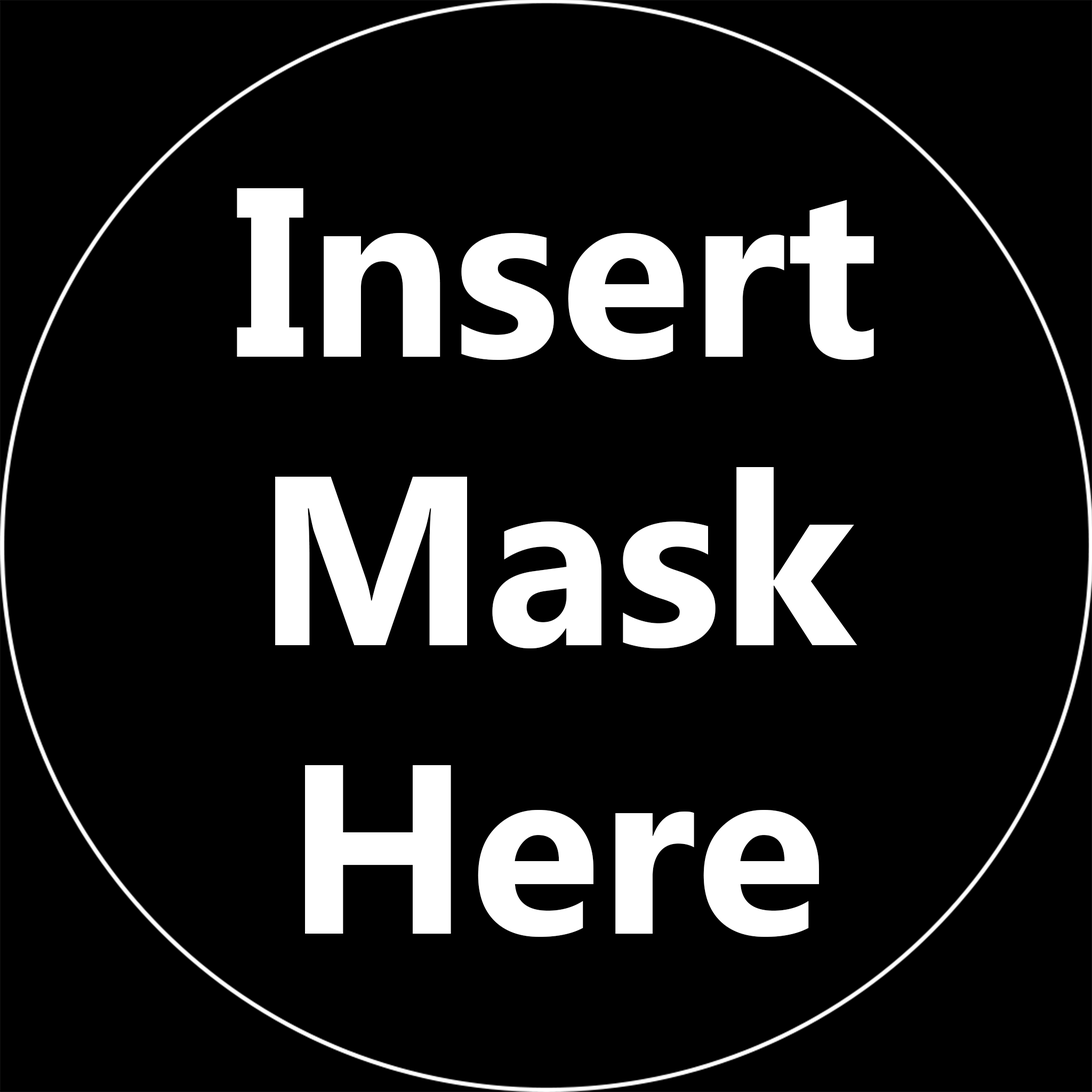
<style>
.page{position:relative;width:1092px;height:1092px;background:#000000}
.page>*{position:absolute;margin:0}
.t1{font:240.4px "MicrosoftTaiLe-Bold";color:#ffffff}
</style>
<div class="page">
<p class="t1" style="left:237px;top:188px;width:637px;height:749px;text-align:center">Insert<br>Mask<br>Here</p>
</div>
